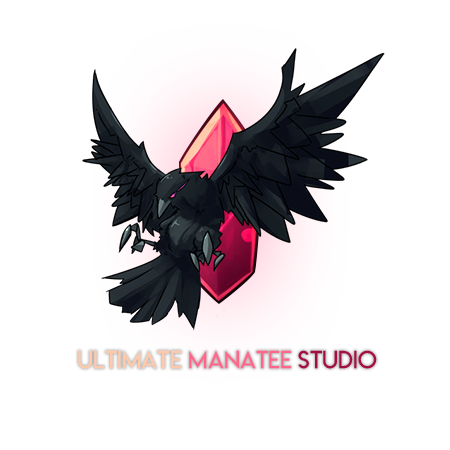
<style>
.page{position:relative;width:450px;height:450px;background:#ffffff}
.page>*{position:absolute;margin:0}
.t1{font:24px "LemonMilklight";color:#ffc9aa}
.t2{font:24px "LemonMilklight";color:#ff6689}
.t3{font:24px "LemonMilklight";color:#a40f43}
</style>
<div class="page">
<p class="t1" style="left:78px;top:350px;width:299px;height:19px">Ultimate <span class="t2">Manatee </span><span class="t3">Studio</span></p>
</div>
